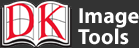
<style>
.page{position:relative;width:139px;height:48px;background:#333333}
.page>*{position:absolute;margin:0}
.t1{font:22px/21px "MyriadPro-Bold";letter-spacing:-0.003em;color:#ffffff}
</style>
<div class="page">
<p class="t1" style="left:78px;top:8px;width:61px;height:37px">Image<br>Tools</p>
</div>
